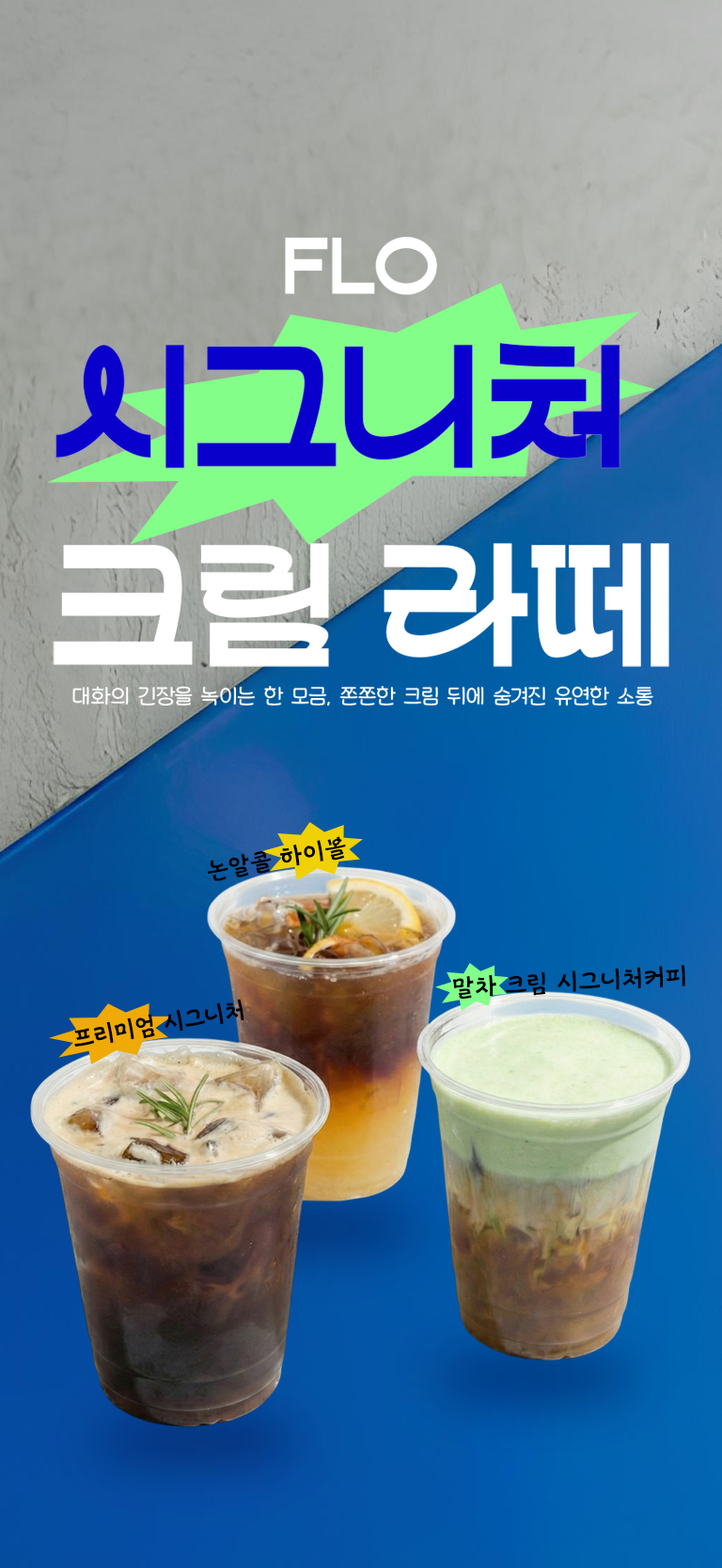
<style>
.page{position:relative;width:722px;height:1568px}
.page>*{position:absolute;margin:0}
.t1{font:87px "HSJandari-Regular";letter-spacing:0.01em;color:#ffffff}
.t2{font:165.4px "HSJandari-Regular";letter-spacing:0.01em}
.t3{font:22.6px "HakgyoansimDunggeunmisoOTF-R";letter-spacing:0.01em;color:#ffffff}
.t4{font:25.4px "MapoBackpacking";letter-spacing:0.01em;color:#000000;scale:1.06 1}
.t5{font:25.4px "MapoBackpacking";letter-spacing:0.01em;color:#000000}
</style>
<div class="page">
<p class="t1" style="left:285px;top:237px;width:152px;height:58px">FLO</p>
<p class="t2" style="left:53px;top:343px;width:616px;height:324px">시그니처 <br>크림 라떼</p>
<p class="t2" style="left:53px;top:343px;width:616px;height:324px">시그니처 <br>크림 라떼</p>
<p class="t3" style="left:72px;top:686px;width:581px;height:20px">대화의 긴장을 녹이는 한 모금, 쫀쫀한 크림 뒤에 숨겨진 유연한 소통</p>
<p class="t4" style="left:207px;top:836px;width:139px;height:45px;rotate:-10deg">논알콜 하이볼</p>
<p class="t4" style="left:452px;top:965px;width:233px;height:35px;rotate:-3deg">말차 크림 시그니처커피</p>
<p class="t5" style="left:74px;top:999px;width:170px;height:48px;rotate:-10deg">프리미엄 시그니처</p>
</div>
